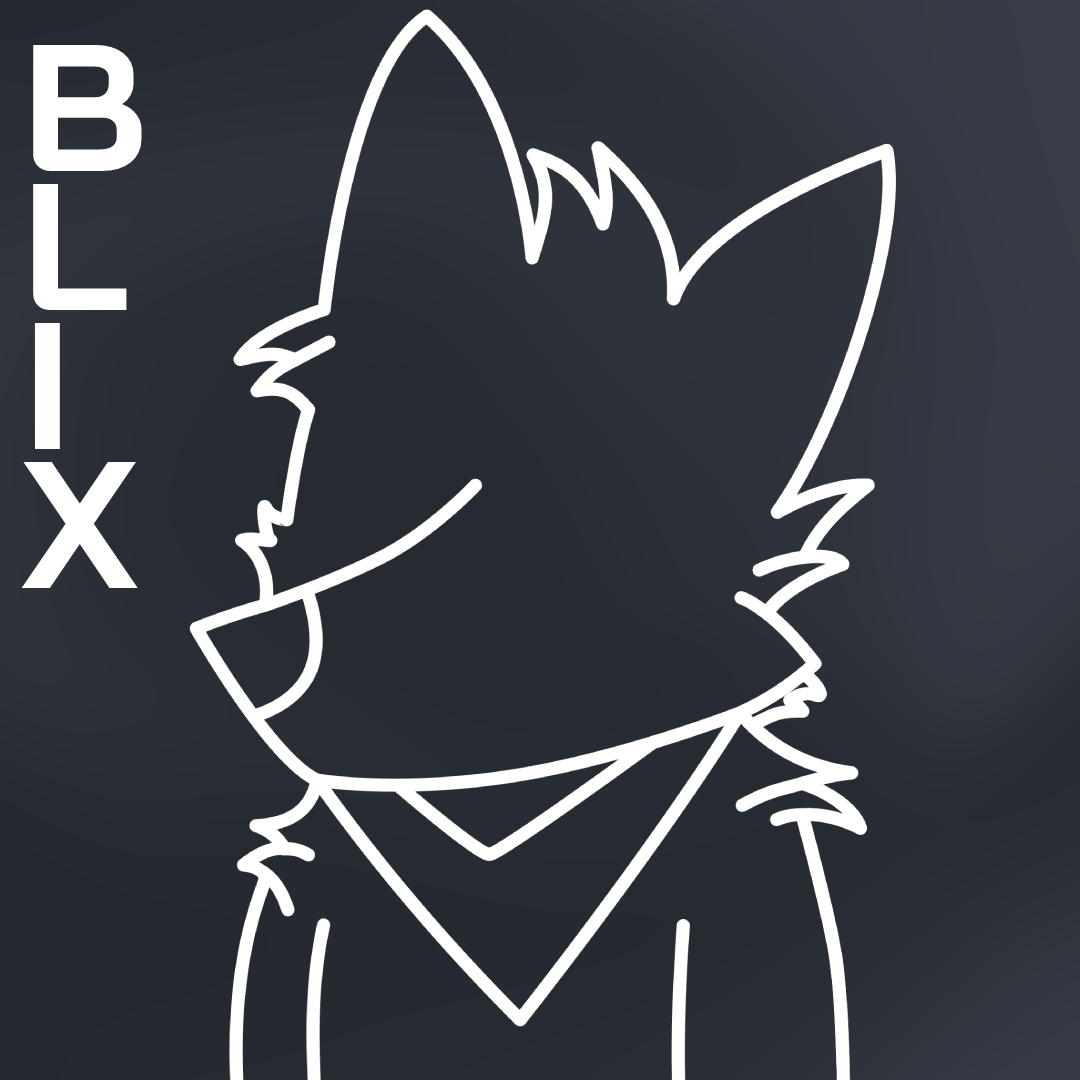
<style>
.page{position:relative;width:1080px;height:1080px}
.page>*{position:absolute;margin:0}
.t1{font:180px/139px "BaiJamjuree-Bold";color:#ffffff}
</style>
<div class="page">
<p class="t1" style="left:21px;top:45px;width:121px;height:543px">B<br>L<br>I<br>X</p>
</div>
